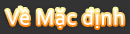
<style>
.page{position:relative;width:130px;height:34px;background:#333333}
.page>*{position:absolute;margin:0}
.t1{font:22px "Corbel";letter-spacing:0.035em;color:#ffffff}
</style>
<div class="page">
<p class="t1" style="left:6px;top:7px;width:118px;height:21px">Về Mặc định</p>
</div>
